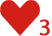
<style>
.page{position:relative;width:52px;height:36px;background:#d22018}
.page>*{position:absolute;margin:0}
.t1{font:23.4px "MyriadPro-Regular";letter-spacing:-0.1em;color:#d22018;font-weight:bold}
</style>
<div class="page">
<p class="t1" style="left:39px;top:19px;width:11px;height:17px">3</p>
</div>
